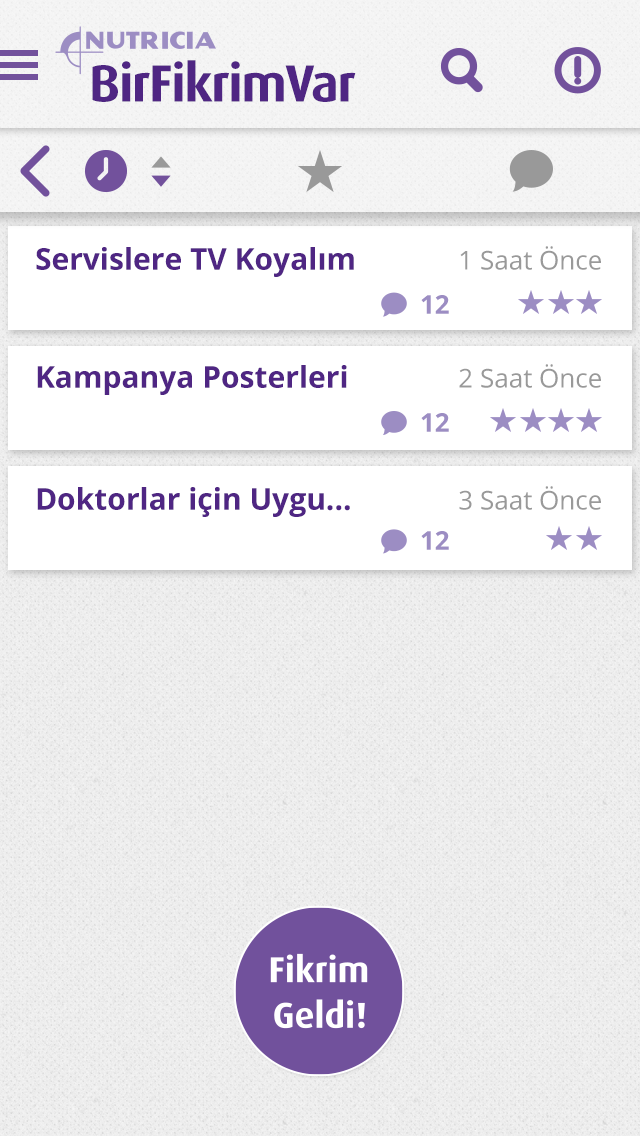
<style>
.page{position:relative;width:640px;height:1136px;background:#ffffff}
.page>*{position:absolute;margin:0}
.t1{font:52.5px "DaxPro-Bold";letter-spacing:-0.025em;color:#4f2683}
.t2{font:26px "OpenSans";color:#999999}
.t3{font:30px "OpenSans-Bold";color:#4f2683}
.t4{font:26px "OpenSans-Bold";color:#9c8dc3}
</style>
<div class="page">
<p class="t1" style="left:92px;top:60px;width:264px;height:42px">BirFikrimVar</p>
<p class="t2" style="left:460px;top:246px;width:141px;height:24px">1 Saat Önce</p>
<p class="t3" style="left:36px;top:247px;width:318px;height:30px">Servislere TV Koyalım</p>
<p class="t4" style="left:421px;top:295px;width:28px;height:19px">12</p>
<p class="t3" style="left:37px;top:365px;width:310px;height:30px">Kampanya Posterleri</p>
<p class="t2" style="left:459px;top:364px;width:142px;height:24px">2 Saat Önce</p>
<p class="t4" style="left:421px;top:413px;width:28px;height:19px">12</p>
<p class="t2" style="left:459px;top:486px;width:142px;height:24px">3 Saat Önce</p>
<p class="t3" style="left:37px;top:487px;width:313px;height:30px">Doktorlar için Uygu...</p>
<p class="t4" style="left:421px;top:531px;width:28px;height:19px">12</p>
</div>
